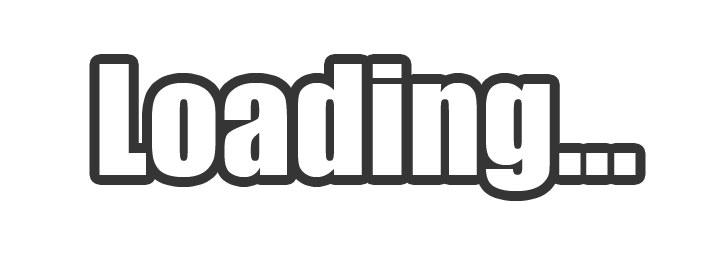
<style>
.page{position:relative;width:714px;height:256px;background:#ffffff}
.page>*{position:absolute;margin:0}
.t1{font:139.7px "Impact";letter-spacing:0.012em;color:#ffffff}
</style>
<div class="page">
<p class="t1" style="left:99px;top:64px;width:537px;height:127px">Loading...</p>
</div>
